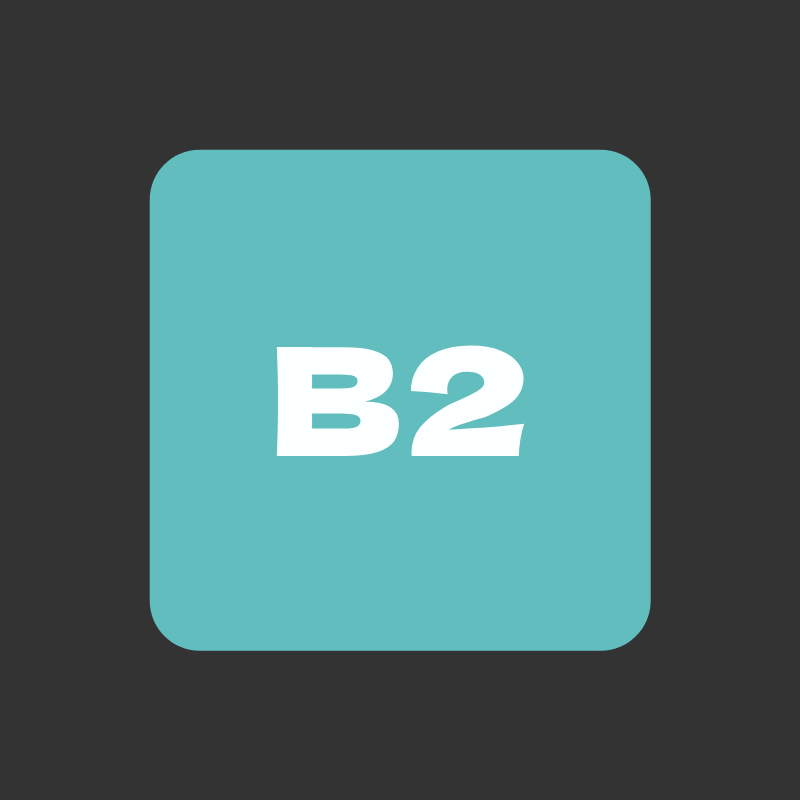
<style>
.page{position:relative;width:800px;height:800px;background:#333333}
.page>*{position:absolute;margin:0}
.t1{font:150px "DelaGothicOne-Regular";color:#fcffff}
</style>
<div class="page">
<p class="t1" style="left:276px;top:345px;width:249px;height:111px">B2</p>
</div>
